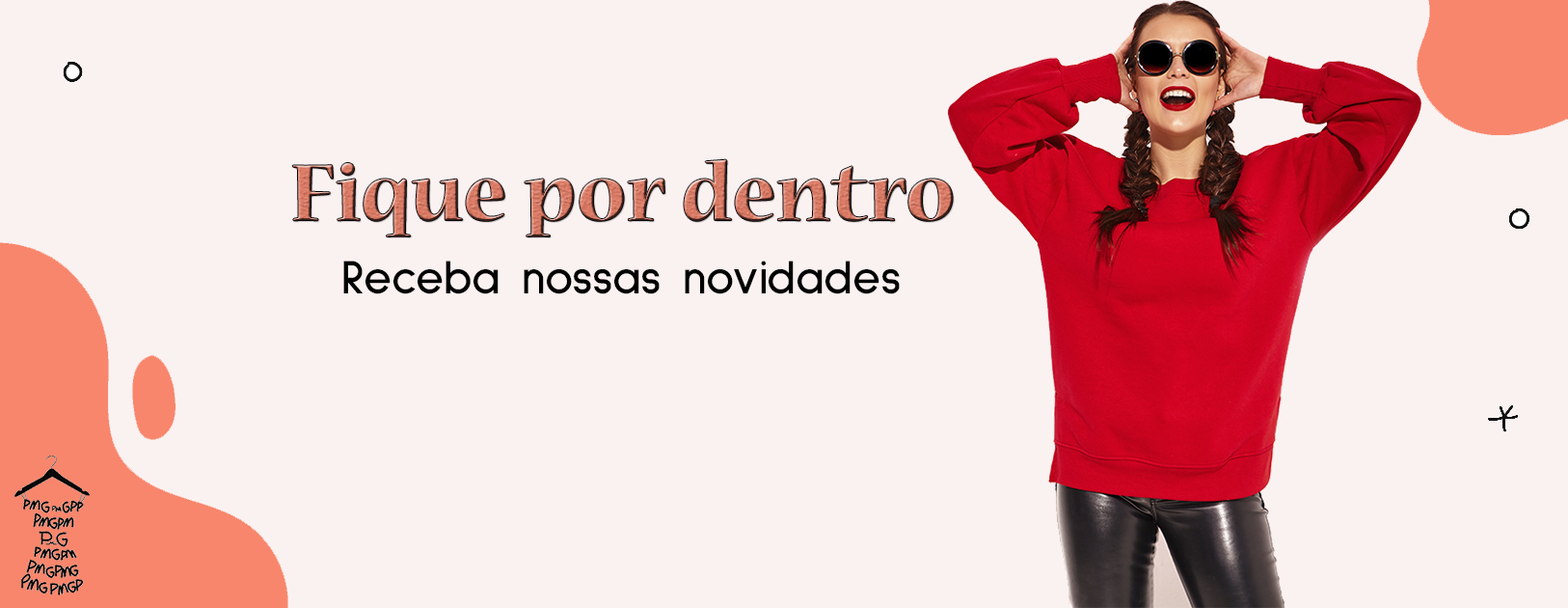
<style>
.page{position:relative;width:1568px;height:608px;background:#faf2f1}
.page>*{position:absolute;margin:0}
.t1{font:88.4px "NuevaStd-Bold";color:#df816a}
.t2{font:48.2px "SulphurPoint-Bold";color:#000000}
</style>
<div class="page">
<p class="t1" style="left:292px;top:159px;width:661px;height:77px">Fique por dentro</p>
<p class="t2" style="left:343px;top:260px;width:557px;height:34px">Receba nossas novidades</p>
</div>
